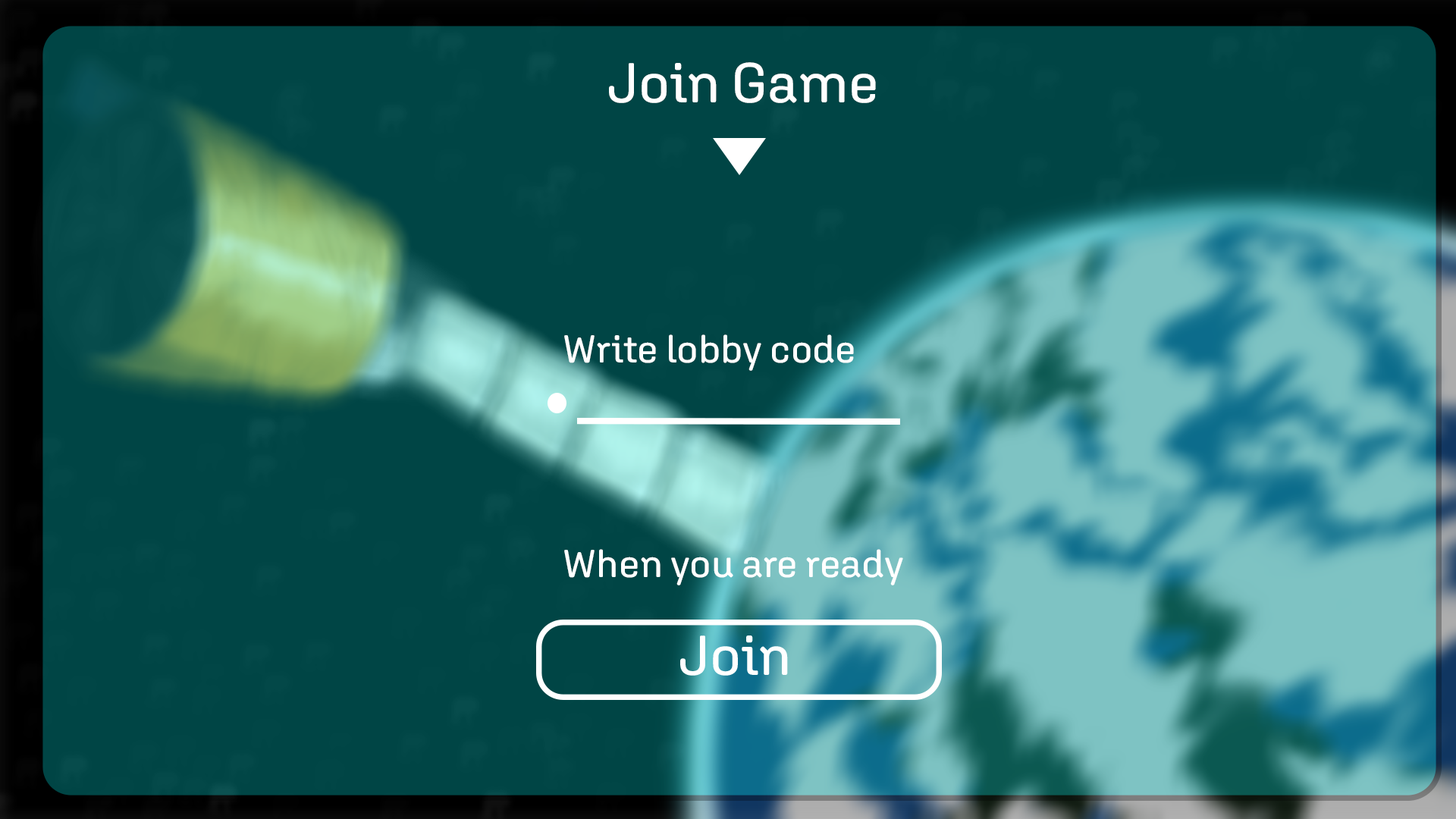
<style>
.page{position:relative;width:1456px;height:819px;background:#004545}
.page>*{position:absolute;margin:0}
.t1{font:56.2px "AgletSansVF_465.000wght_0ital";color:#ffffff}
.t2{font:38.9px "AgletSansVF_465.000wght_0ital";color:#ffffff}
</style>
<div class="page">
<p class="t1" style="left:609px;top:62px;width:267px;height:41px">Join Game</p>
<p class="t2" style="left:564px;top:334px;width:290px;height:37px">Write lobby code</p>
<p class="t2" style="left:564px;top:549px;width:339px;height:36px">When you are ready</p>
</div>
